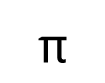
<style>
.page{position:relative;width:105px;height:83px;background:#ffffff}
.page>*{position:absolute;margin:0}
.t1{font:47.9px "DroidSans";color:#000000}
</style>
<div class="page">
<p class="t1" style="left:38px;top:36px;width:29px;height:27px">π</p>
</div>
